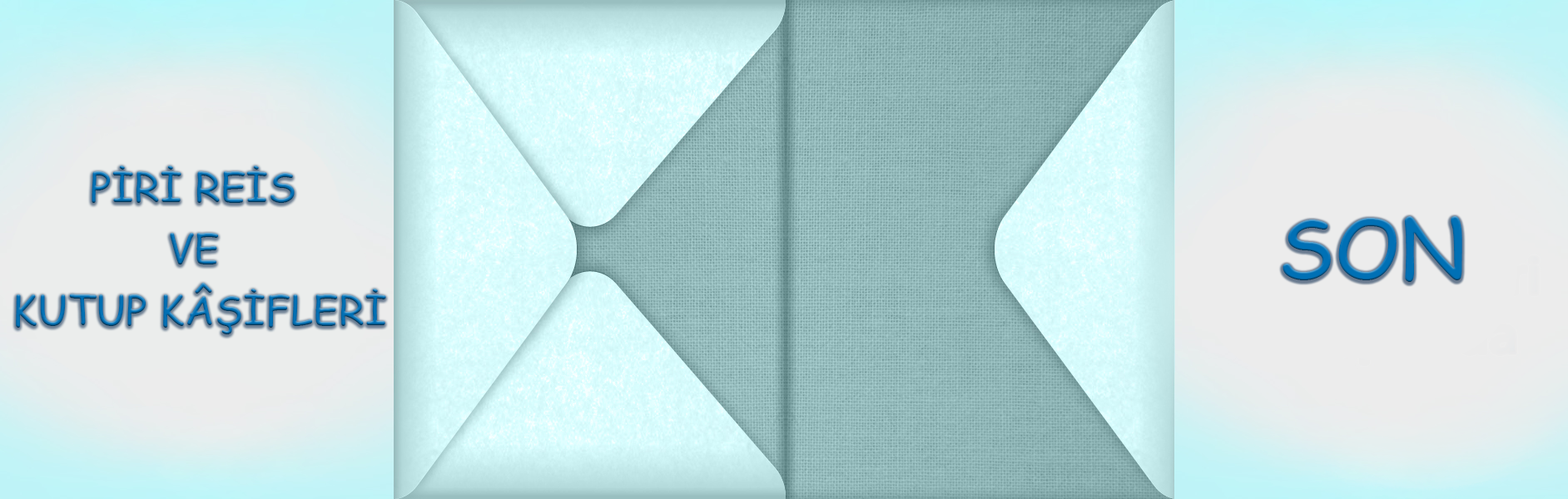
<style>
.page{position:relative;width:1568px;height:499px}
.page>*{position:absolute;margin:0}
.t1{font:41px/61.6px "ComicSansMS";letter-spacing:0.001em;text-transform:uppercase}
.t2{font:82.1px "ComicSansMS";letter-spacing:0.001em;color:#0070b5;text-transform:uppercase}
</style>
<div class="page">
<p class="t1" style="left:16px;top:166px;width:370px;height:169px;text-align:center">Piri reis <br>ve <br>kutup kâşifleri</p>
<p class="t2" style="left:1283px;top:216px;width:179px;height:66px">SON</p>
</div>
